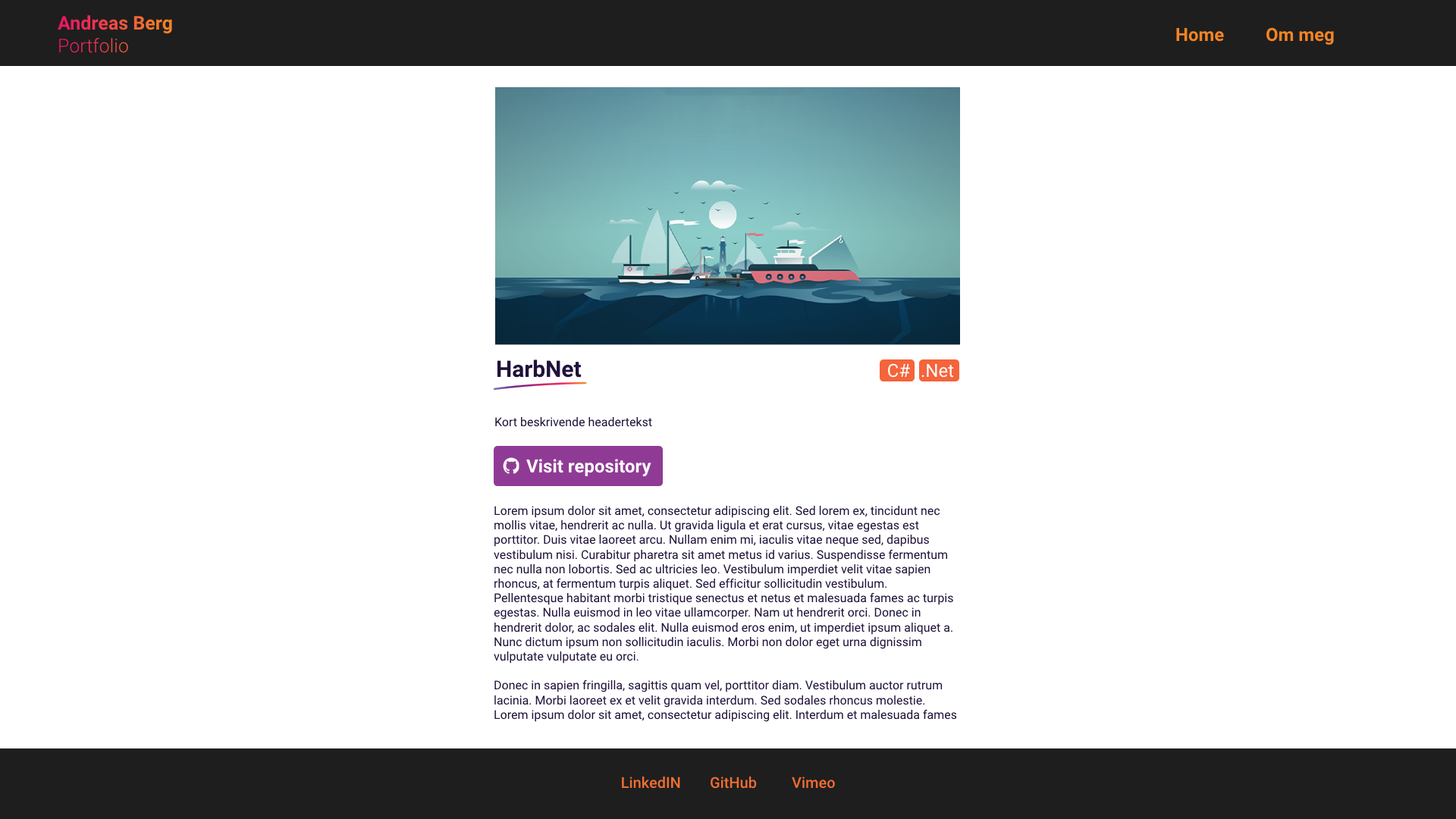
<style>
.page{position:relative;width:1456px;height:819px;background:#ffffff}
.page>*{position:absolute;margin:0}
.t1{font:19px "Roboto-Bold"}
.t2{font:19px "Roboto-Light"}
.t3{font:18.2px "Roboto-Bold";color:#f48424}
.t4{font:22.7px "Roboto-Bold";color:#20123a}
.t5{font:18.2px "Roboto-Regular";color:#ffffff}
.t6{font:12.1px "Roboto-Regular";color:#20123a}
.t7{font:18.2px "Roboto-Bold";color:#ffffff}
.t8{font:15.2px "Roboto-Medium";color:#f36e31}
</style>
<div class="page">
<p class="t1" style="left:58px;top:15px;width:114px;height:38px">Andreas Berg<br><span class="t2">Portfolio</span></p>
<p class="t3" style="left:1176px;top:27px;width:158px;height:18px">Home  Om meg</p>
<p class="t4" style="left:497px;top:359px;width:85px;height:19px">HarbNet</p>
<p class="t5" style="left:888px;top:363px;width:66px;height:15px">C#  .Net</p>
<p class="t6" style="left:495px;top:417px;width:157px;height:10px">Kort beskrivende headertekst</p>
<p class="t7" style="left:526px;top:459px;width:125px;height:18px">Visit repository</p>
<p class="t6" style="left:494px;top:506px;width:463px;height:216px">Lorem ipsum dolor sit amet, consectetur adipiscing elit. Sed lorem ex, tincidunt nec mollis vitae, hendrerit ac nulla. Ut gravida ligula et erat cursus, vitae egestas est porttitor. Duis vitae laoreet arcu. Nullam enim mi, iaculis vitae neque sed, dapibus vestibulum nisi. Curabitur pharetra sit amet metus id varius. Suspendisse fermentum nec nulla non lobortis. Sed ac ultricies leo. Vestibulum imperdiet velit vitae sapien rhoncus, at fermentum turpis aliquet. Sed efficitur sollicitudin vestibulum. Pellentesque habitant morbi tristique senectus et netus et malesuada fames ac turpis egestas. Nulla euismod in leo vitae ullamcorper. Nam ut hendrerit orci. Donec in hendrerit dolor, ac sodales elit. Nulla euismod eros enim, ut imperdiet ipsum aliquet a. Nunc dictum ipsum non sollicitudin iaculis. Morbi non dolor eget urna dignissim vulputate vulputate eu orci.<br><br>Donec in sapien fringilla, sagittis quam vel, porttitor diam. Vestibulum auctor rutrum lacinia. Morbi laoreet ex et velit gravida interdum. Sed sodales rhoncus molestie. Lorem ipsum dolor sit amet, consectetur adipiscing elit. Interdum et malesuada fames ac ante ipsum primis in faucibus. Vivamus congue nulla varius, ullamcorper justo sed, tincidunt arcu. Curabitur ullamcorper ante aliquet urna cursus gravida. Suspendisse potenti. Integer in neque id dolor rutrum laoreet non non enim. Donec ac tincidunt lacus, eget egestas nibh. Curabitur volutpat vitae felis sed ultrices. Etiam scelerisque dui quis risus ultricies suscipit. Aliquam bibendum condimentum mattis. Proin viverra lorem ut placerat iaculis.</p>
<p class="t8" style="left:622px;top:777px;width:213px;height:12px">LinkedIN GitHub  Vimeo</p>
</div>
